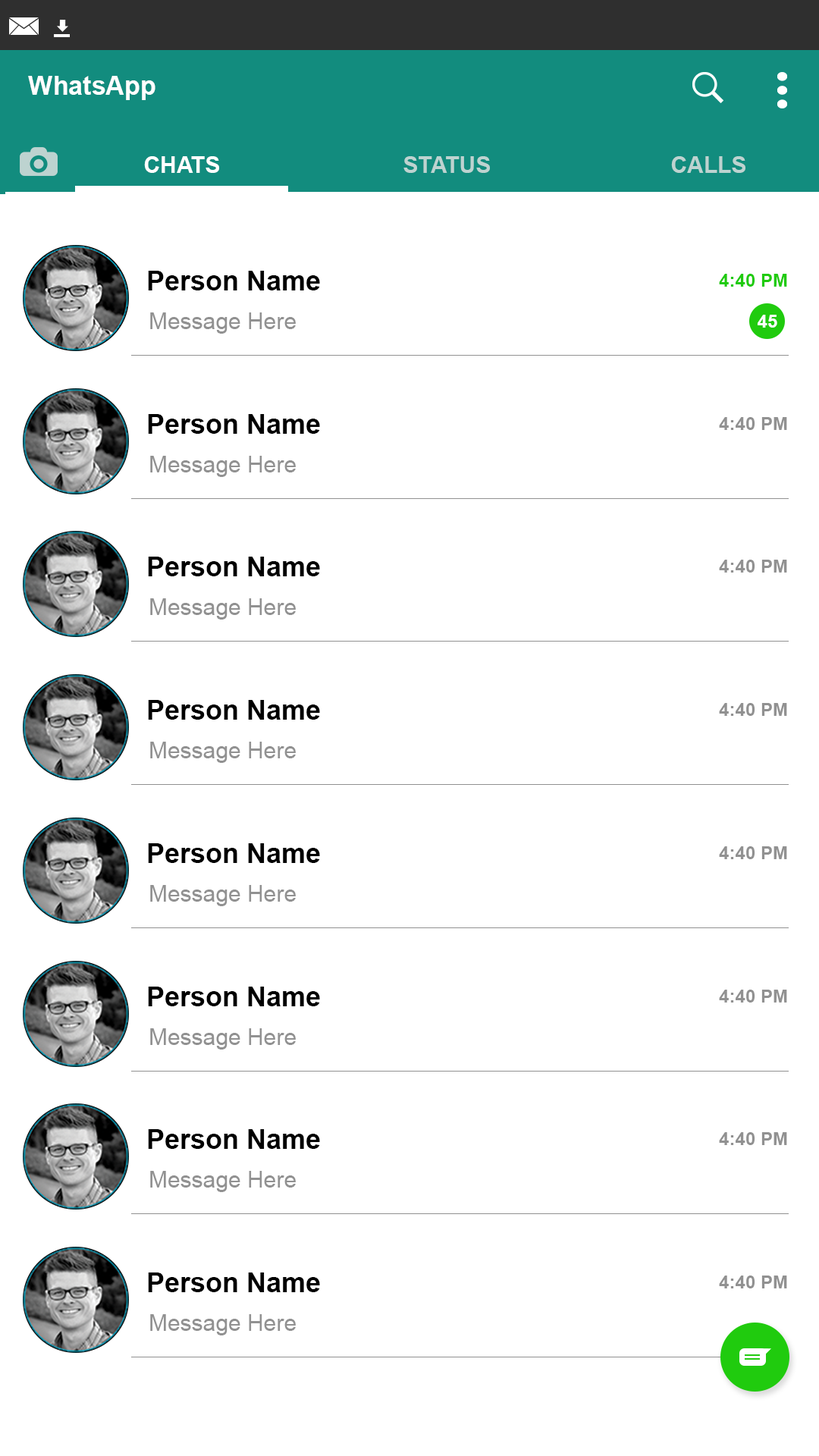
<style>
.page{position:relative;width:819px;height:1456px;background:#ffffff}
.page>*{position:absolute;margin:0}
.t1{font:25.8px "Arial-BoldMT";color:#ffffff}
.t2{font:22.7px "Arial-BoldMT";color:#ffffff}
.t3{font:22.7px "Arial-BoldMT";color:#bdd3d0}
.t4{font:27.3px "Arial-BoldMT";color:#000000}
.t5{font:18.2px "Arial-BoldMT";color:#20cb0e}
.t6{font:22.7px "ArialMT";color:#919191}
.t7{font:18.2px "Arial-BoldMT";color:#ffffff}
.t8{font:18.2px "Arial-BoldMT";color:#919191}
</style>
<div class="page">
<p class="t1" style="left:28px;top:76px;width:127px;height:24px">WhatsApp</p>
<p class="t1" style="left:28px;top:76px;width:127px;height:24px">WhatsApp</p>
<p class="t2" style="left:144px;top:156px;width:75px;height:17px">CHATS</p>
<p class="t2" style="left:144px;top:156px;width:75px;height:17px">CHATS</p>
<p class="t3" style="left:403px;top:156px;width:87px;height:17px">STATUS</p>
<p class="t3" style="left:403px;top:156px;width:87px;height:17px">STATUS</p>
<p class="t3" style="left:671px;top:156px;width:74px;height:17px">CALLS</p>
<p class="t3" style="left:671px;top:156px;width:74px;height:17px">CALLS</p>
<p class="t4" style="left:148px;top:271px;width:172px;height:19px">Person Name</p>
<p class="t5" style="left:719px;top:274px;width:68px;height:13px">4:40 PM</p>
<p class="t6" style="left:150px;top:312px;width:146px;height:22px">Message Here</p>
<p class="t7" style="left:758px;top:315px;width:19px;height:13px">45</p>
<p class="t4" style="left:148px;top:414px;width:172px;height:20px">Person Name</p>
<p class="t8" style="left:719px;top:417px;width:68px;height:13px">4:40 PM</p>
<p class="t6" style="left:150px;top:456px;width:146px;height:21px">Message Here</p>
<p class="t4" style="left:148px;top:557px;width:172px;height:19px">Person Name</p>
<p class="t8" style="left:719px;top:560px;width:68px;height:13px">4:40 PM</p>
<p class="t6" style="left:150px;top:598px;width:146px;height:22px">Message Here</p>
<p class="t4" style="left:148px;top:700px;width:172px;height:20px">Person Name</p>
<p class="t8" style="left:719px;top:703px;width:68px;height:13px">4:40 PM</p>
<p class="t6" style="left:150px;top:742px;width:146px;height:21px">Message Here</p>
<p class="t4" style="left:148px;top:843px;width:172px;height:20px">Person Name</p>
<p class="t8" style="left:719px;top:846px;width:68px;height:13px">4:40 PM</p>
<p class="t6" style="left:150px;top:885px;width:146px;height:21px">Message Here</p>
<p class="t4" style="left:148px;top:987px;width:172px;height:19px">Person Name</p>
<p class="t8" style="left:719px;top:990px;width:68px;height:13px">4:40 PM</p>
<p class="t6" style="left:150px;top:1028px;width:146px;height:22px">Message Here</p>
<p class="t4" style="left:148px;top:1129px;width:172px;height:20px">Person Name</p>
<p class="t8" style="left:719px;top:1132px;width:68px;height:13px">4:40 PM</p>
<p class="t6" style="left:150px;top:1171px;width:146px;height:21px">Message Here</p>
<p class="t4" style="left:148px;top:1272px;width:172px;height:20px">Person Name</p>
<p class="t8" style="left:719px;top:1275px;width:68px;height:13px">4:40 PM</p>
<p class="t6" style="left:150px;top:1314px;width:146px;height:21px">Message Here</p>
</div>
